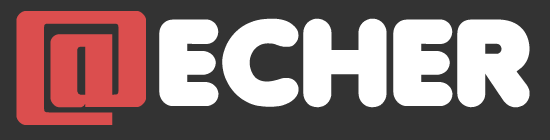
<style>
.page{position:relative;width:550px;height:140px;background:#333333}
.page>*{position:absolute;margin:0}
.t1{font:120px "MyPuma";color:#db4e4e}
.t2{font:120px "Debussy";color:#ffffff}
</style>
<div class="page">
<p class="t1" style="left:16px;top:11px;width:130px;height:114px">@</p>
<p class="t2" style="left:159px;top:18px;width:371px;height:90px">ECHER</p>
</div>
